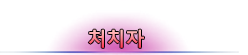
<style>
.page{position:relative;width:248px;height:55px;background:#ffffff}
.page>*{position:absolute;margin:0}
.t1{font:19px "MalgunGothicBold"}
</style>
<div class="page">
<p class="t1" style="left:88px;top:29px;width:56px;height:19px">처치자</p>
</div>
